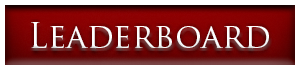
<style>
.page{position:relative;width:300px;height:70px;background:#ffffff}
.page>*{position:absolute;margin:0}
.t1{font:33.3px "TrajanPro-Regular";color:#ffffff}
</style>
<div class="page">
<p class="t1" style="left:31px;top:22px;width:238px;height:27px">Leaderboard</p>
</div>
